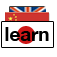
<style>
.page{position:relative;width:57px;height:57px;background:#ffffff}
.page>*{position:absolute;margin:0}
.t1{font:18.8px "HelveticaNeue-Bold";color:#000000}
</style>
<div class="page">
<p class="t1" style="left:5px;top:27px;width:44px;height:14px">learn</p>
</div>
